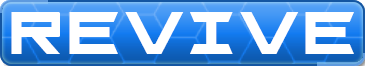
<style>
.page{position:relative;width:366px;height:67px;background:#ffffff}
.page>*{position:absolute;margin:0}
.t1{font:65.7px "QORE";color:#ffffff}
</style>
<div class="page">
<p class="t1" style="left:11px;top:12px;width:343px;height:42px">REVIVE</p>
</div>
